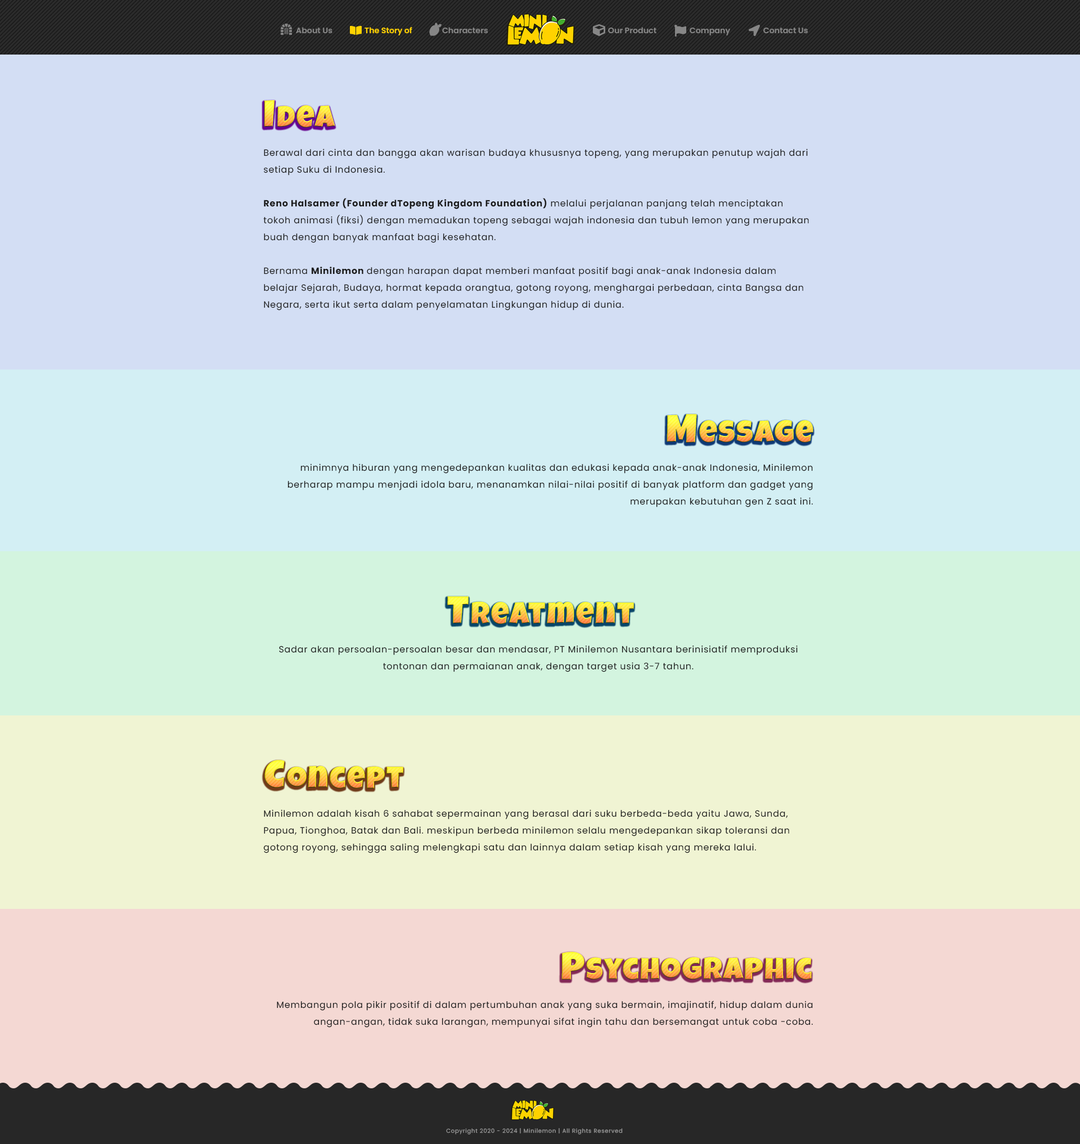
<style>
.page{position:relative;width:1080px;height:1144px;background:#d3def4}
.page>*{position:absolute;margin:0}
.t1{font:7.9px "Poppins-SemiBold";color:#868686}
.t2{font:7.9px "Poppins-SemiBold";color:#ffd200}
.t3{font:30.9px "LuckiestGuy-Regular";letter-spacing:0.05em}
.t4{font:39.4px "LuckiestGuy-Regular";letter-spacing:0.05em}
.t5{font:9px/16.9px "Poppins-Regular";letter-spacing:0.05em;color:#1b1b1b}
.t6{font:9px/16.9px "Poppins-Bold";letter-spacing:0.05em;color:#1b1b1b}
.t7{font:5.6px "Poppins-Regular";letter-spacing:0.075em;color:#9b9b9b}
</style>
<div class="page">
<p class="t1" style="left:296px;top:27px;width:36px;height:7px">About Us</p>
<p class="t2" style="left:364px;top:27px;width:48px;height:8px">The Story of</p>
<p class="t1" style="left:442px;top:27px;width:46px;height:7px">Characters</p>
<p class="t1" style="left:608px;top:27px;width:48px;height:7px">Our Product</p>
<p class="t1" style="left:690px;top:28px;width:40px;height:7px">Company</p>
<p class="t1" style="left:763px;top:28px;width:45px;height:6px">Contact Us</p>
<p class="t3" style="left:264px;top:100px;width:71px;height:28px"><span class="t4">I</span>dea</p>
<p class="t5" style="left:263px;top:148px;width:546px;height:162px">Berawal dari cinta dan bangga akan warisan budaya khususnya topeng, yang merupakan penutup wajah dari setiap Suku di Indonesia.<br><br><span class="t6">Reno Halsamer (Founder dTopeng Kingdom Foundation)</span> melalui perjalanan panjang telah menciptakan tokoh animasi (fiksi) dengan memadukan topeng sebagai wajah indonesia dan tubuh lemon yang merupakan buah dengan banyak manfaat bagi kesehatan.<br><br>Bernama <span class="t6">Minilemon </span>dengan harapan dapat memberi manfaat positif bagi anak-anak Indonesia dalam belajar Sejarah, Budaya, hormat kepada orangtua, gotong royong, menghargai perbedaan, cinta Bangsa dan Negara, serta ikut serta dalam penyelamatan Lingkungan hidup di dunia.</p>
<p class="t3" style="left:667px;top:414px;width:146px;height:29px"><span class="t4">M</span>essage</p>
<p class="t5" style="left:287px;top:464px;width:526px;height:43px;text-align:right">minimnya hiburan yang mengedepankan kualitas dan edukasi kepada anak-anak Indonesia, Minilemon berharap mampu menjadi idola baru, menanamkan nilai-nilai positif di banyak platform dan gadget yang merupakan kebutuhan gen Z saat ini.</p>
<p class="t3" style="left:447px;top:596px;width:187px;height:28px"><span class="t4">T</span>reatment</p>
<p class="t5" style="left:279px;top:645px;width:519px;height:27px;text-align:center">Sadar akan persoalan-persoalan besar dan mendasar, PT Minilemon Nusantara berinisiatif memproduksi  tontonan dan permaianan anak, dengan target usia 3-7 tahun.</p>
<p class="t3" style="left:264px;top:760px;width:139px;height:29px"><span class="t4">C</span>oncept</p>
<p class="t5" style="left:263px;top:809px;width:526px;height:44px">Minilemon adalah kisah 6 sahabat sepermainan yang berasal dari suku berbeda-beda yaitu Jawa, Sunda, Papua, Tionghoa, Batak dan Bali. meskipun berbeda minilemon selalu mengedepankan sikap toleransi dan gotong royong, sehingga saling melengkapi satu dan lainnya dalam setiap kisah yang mereka lalui.</p>
<p class="t3" style="left:561px;top:952px;width:251px;height:28px"><span class="t4">p</span>sychographic</p>
<p class="t5" style="left:277px;top:1001px;width:536px;height:27px;text-align:right">Membangun pola pikir positif di dalam pertumbuhan anak yang suka bermain, imajinatif, hidup dalam dunia angan-angan, tidak suka larangan, mempunyai sifat ingin tahu dan bersemangat untuk coba -coba.</p>
<p class="t7" style="left:446px;top:1128px;width:177px;height:7px">Copyright 2020 - 2024 | Minilemon | All Rights Reserved</p>
</div>
